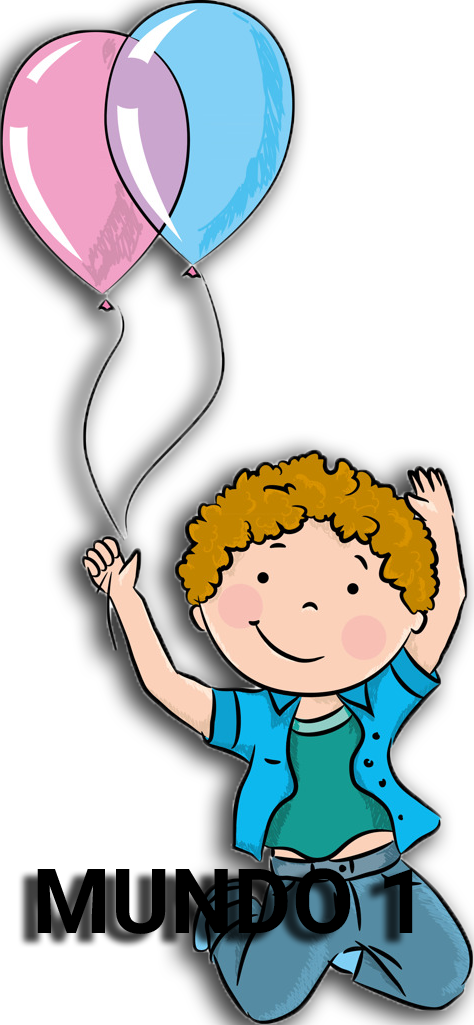
<style>
.page{position:relative;width:474px;height:1025px;background:#ffffff}
.page>*{position:absolute;margin:0}
.t1{font:90px "Roboto-Bold";color:#000000}
</style>
<div class="page">
<p class="t1" style="left:37px;top:868px;width:376px;height:66px">MUNDO 1</p>
</div>
